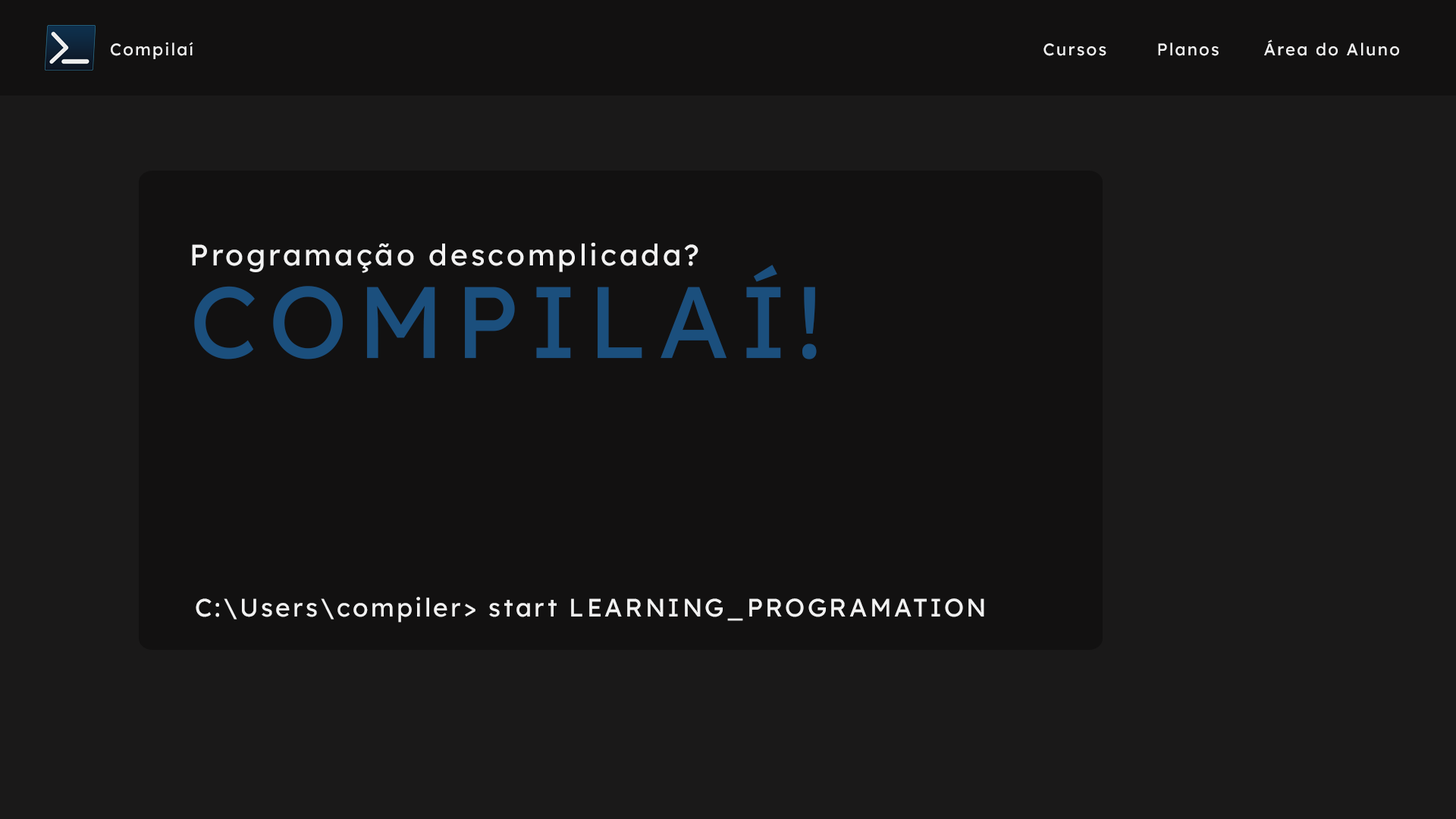
<style>
.page{position:relative;width:1456px;height:819px;background:#1a1919}
.page>*{position:absolute;margin:0}
.t1{font:16.9px "Lexend-Regular";letter-spacing:0.1em;color:#f2f2f2}
.t2{font:29.5px/92.7px "Lexend-Regular";letter-spacing:0.1em;color:#f2f2f2}
.t3{font:101.1px/92.7px "Lexend-Regular";letter-spacing:0.1em;color:#1b4f7d}
.t4{font:25.3px "Lexend-Regular";letter-spacing:0.1em;color:#f2f2f2}
</style>
<div class="page">
<p class="t1" style="left:111px;top:42px;width:82px;height:17px">Compilaí</p>
<p class="t1" style="left:1264px;top:39px;width:135px;height:17px">Área do Aluno</p>
<p class="t1" style="left:1043px;top:43px;width:63px;height:13px">Cursos</p>
<p class="t1" style="left:1158px;top:42px;width:61px;height:14px">Planos</p>
<p class="t2" style="left:192px;top:243px;width:625px;height:116px">Programação descomplicada? <br><span class="t3">COMPILAÍ!</span></p>
<p class="t4" style="left:196px;top:597px;width:788px;height:26px">C:\Users\compiler&gt; start LEARNING_PROGRAMATION</p>
</div>
